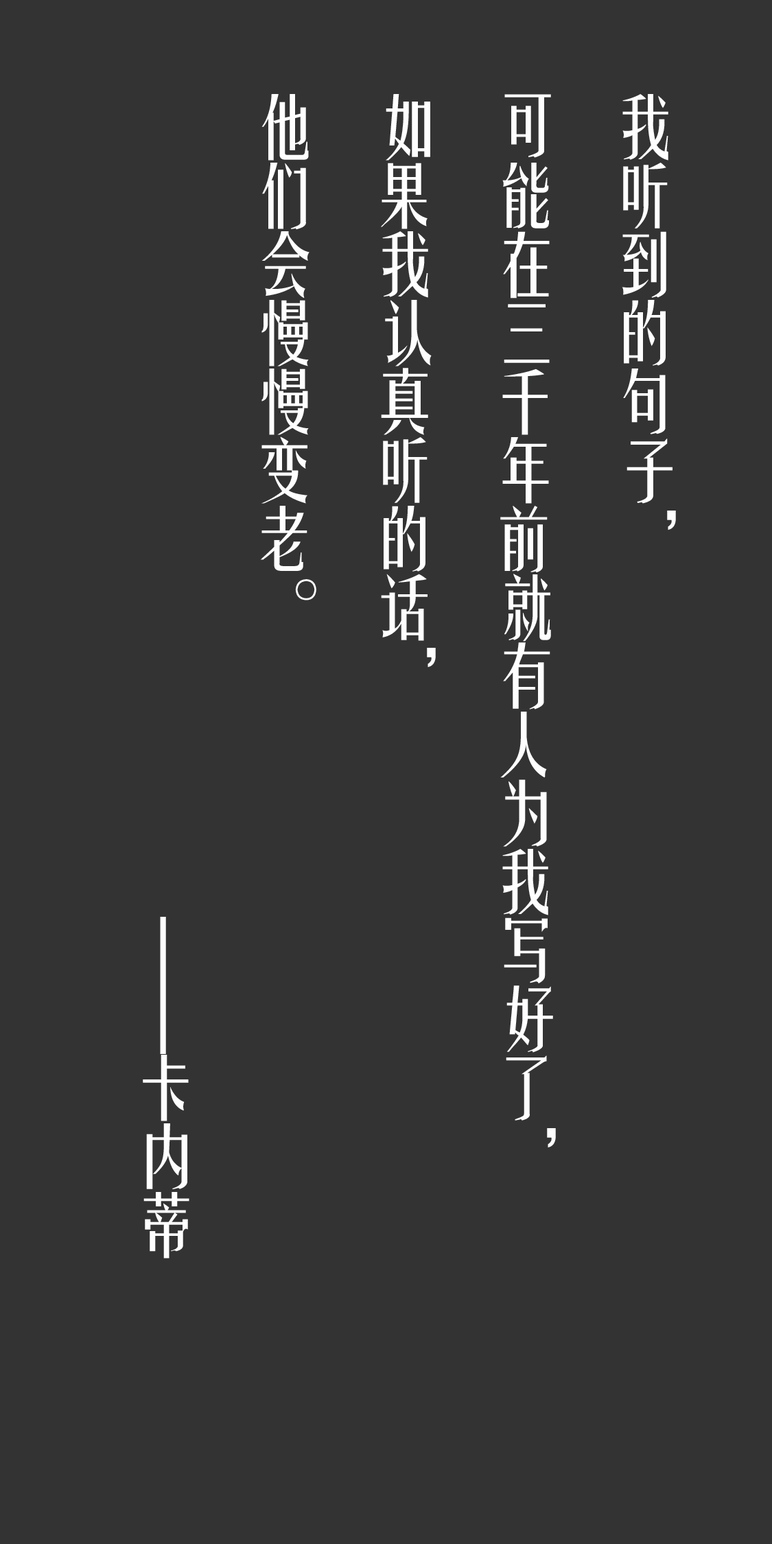
<style>
.page{position:relative;width:772px;height:1544px;background:#333333}
.page>*{position:absolute;margin:0}
.t1{font:68.6px "FZYTK--GBK1-0";color:#fffefe}
</style>
<div class="page">
<p class="t1" style="left:143px;top:94px;width:533px;height:1165px">我听到的句子，<br>可能在三千年前就有人为我写好了，<br>如果我认真听的话，<br>他们会慢慢变老。<br>                                                ——卡内蒂</p>
</div>
